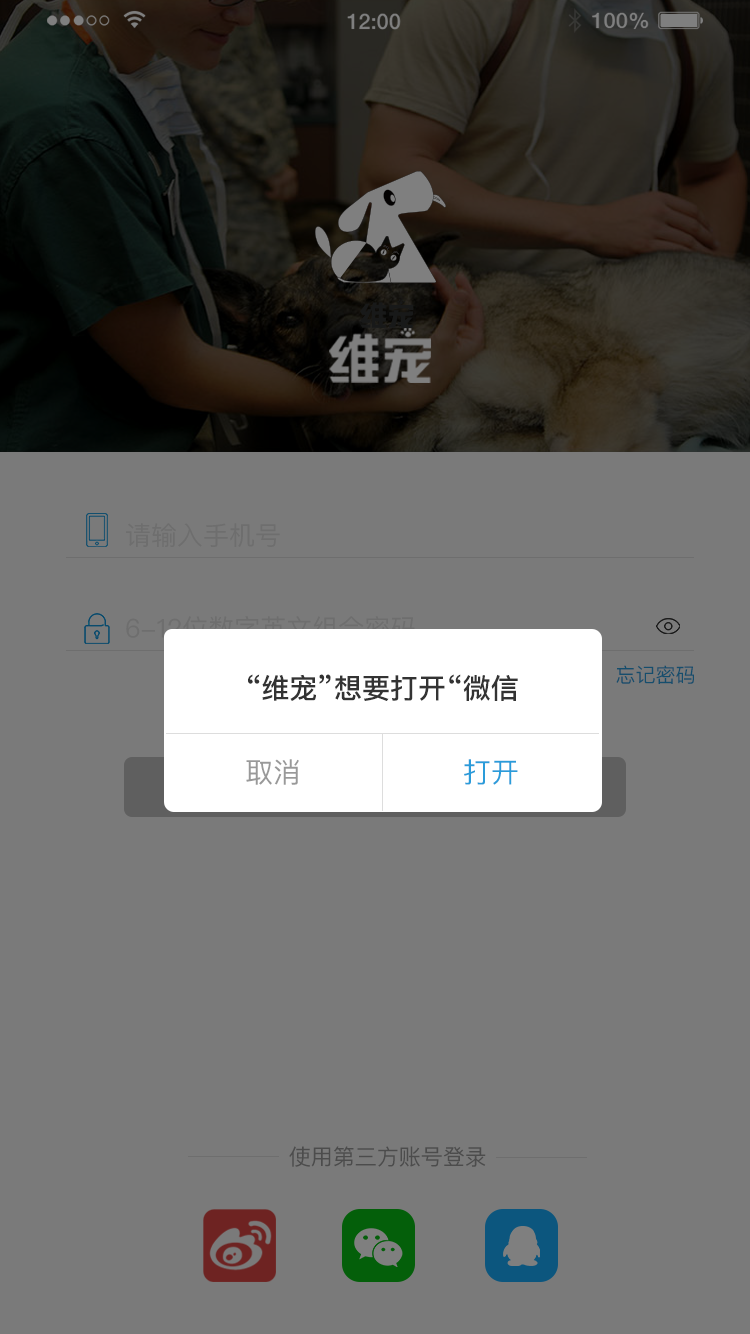
<style>
.page{position:relative;width:750px;height:1334px;background:#7a7a7a}
.page>*{position:absolute;margin:0}
.t1{font:26px "PingFangSC-Regular";color:#6e6e6e}
.t2{font:20px "PingFangSC-Regular";color:#154e6d}
.t3{font:28px "PingFangSC-Medium";color:#333333}
.t4{font:28px "PingFangSC-Regular";color:#999999}
.t5{font:28px "PingFangSC-Regular";color:#2a9cda}
.t6{font:22px "PingFangSC-Regular";color:#4c4c4c}
</style>
<div class="page">
<p class="t1" style="left:126px;top:523px;width:154px;height:25px">请输入手机号</p>
<p class="t2" style="left:616px;top:665px;width:78px;height:19px">忘记密码</p>
<p class="t3" style="left:248px;top:674px;width:270px;height:27px">“维宠”想要打开“微信</p>
<p class="t4" style="left:246px;top:759px;width:53px;height:26px">取消</p>
<p class="t5" style="left:464px;top:759px;width:54px;height:26px">打开</p>
<p class="t6" style="left:289px;top:1146px;width:197px;height:21px">使用第三方账号登录</p>
</div>
